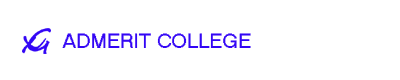
<style>
.page{position:relative;width:400px;height:80px;background:#ffffff}
.page>*{position:absolute;margin:0}
.t1{font:20px "MS Sans Serif";color:#3306f5}
</style>
<div class="page">
<p class="t1" style="left:62px;top:33px;width:189px;height:15px">ADMERIT COLLEGE</p>
</div>
